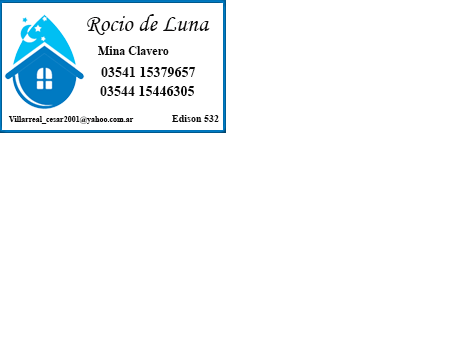
<style>
.page{position:relative;width:454px;height:340px;background:#ffffff}
.page>*{position:absolute;margin:0}
.t1{font:24px "MonotypeCorsiva";color:#0d0c0c}
.t2{font:12px "TimesNewRomanPS-BoldMT";color:#080808}
.t3{font:14px "TimesNewRomanPS-BoldMT";color:#090909}
.t4{font:8px "TimesNewRomanPS-BoldMT";color:#100f0f}
.t5{font:10px "TimesNewRomanPS-BoldMT";color:#090909}
</style>
<div class="page">
<p class="t1" style="left:87px;top:14px;width:123px;height:21px">Rocio de Luna</p>
<p class="t2" style="left:98px;top:46px;width:71px;height:9px">Mina Clavero</p>
<p class="t3" style="left:101px;top:67px;width:95px;height:10px">03541 15379657</p>
<p class="t3" style="left:100px;top:86px;width:94px;height:10px">03544 15446305</p>
<p class="t4" style="left:8px;top:116px;width:126px;height:8px">Villarreal_cesar2001@yahoo.com.ar</p>
<p class="t5" style="left:172px;top:115px;width:47px;height:7px">Edison 532</p>
</div>
